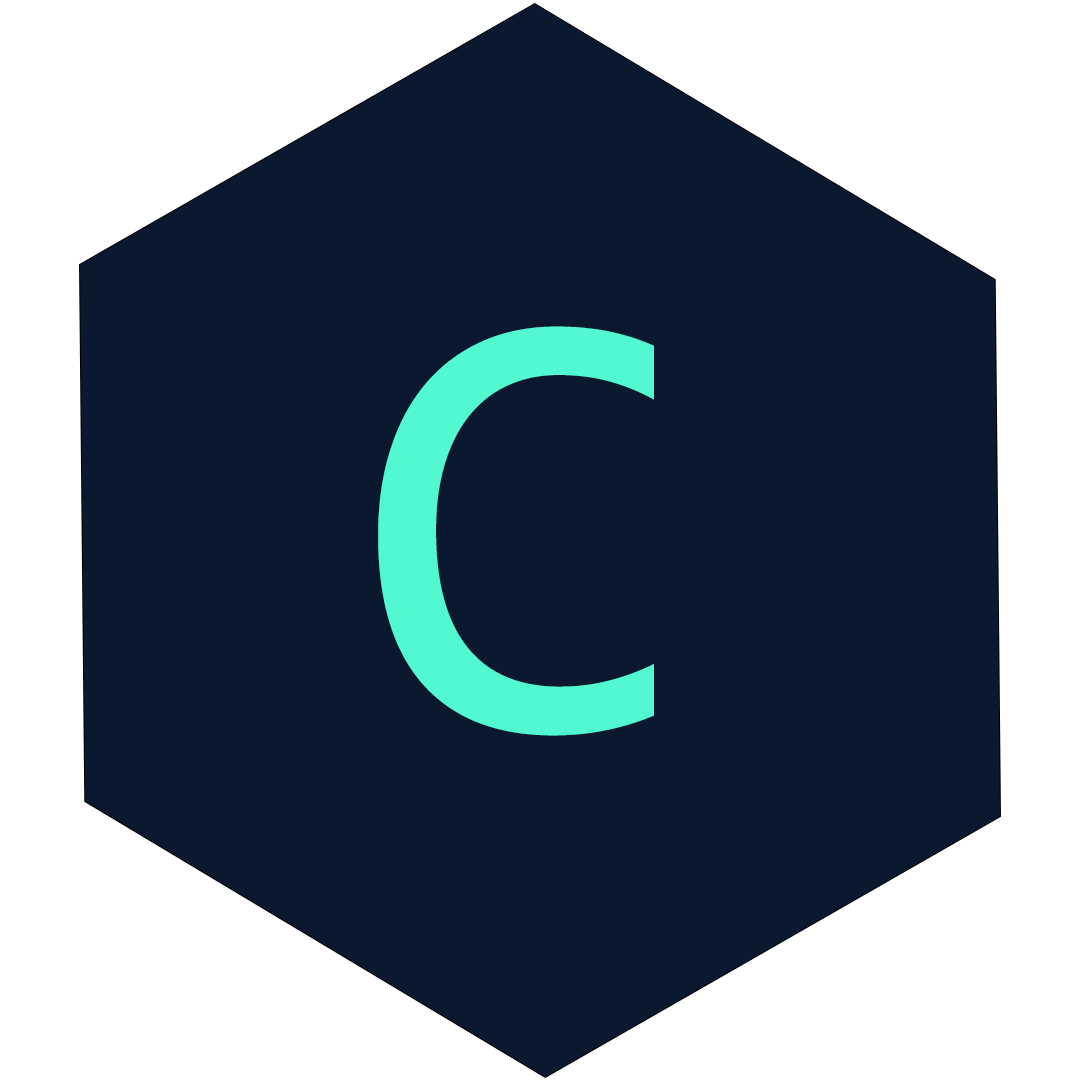
<style>
.page{position:relative;width:1080px;height:1080px;background:#0a192f}
.page>*{position:absolute;margin:0}
.t1{font:625px "Consolas";color:#52f8d0}
</style>
<div class="page">
<p class="t1" style="left:378px;top:326px;width:276px;height:410px">C</p>
</div>
